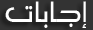
<style>
.page{position:relative;width:93px;height:30px;background:#333333}
.page>*{position:absolute;margin:0}
.t1{font:42.4px "MO_Nawel";letter-spacing:-0.08em;color:#ffffff;scale:0.95 1}
</style>
<div class="page">
<p class="t1" style="left:5px;top:1px;width:81px;height:27px">إ جا با ت</p>
</div>
